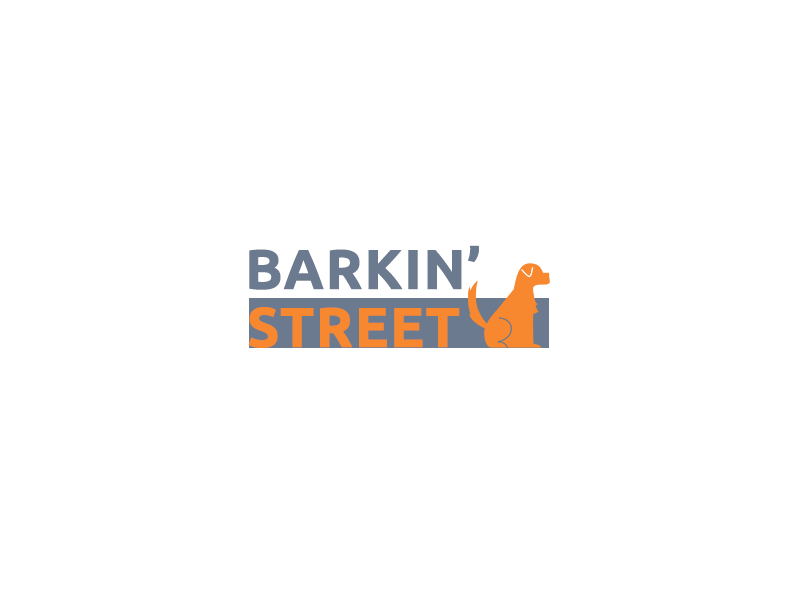
<style>
.page{position:relative;width:800px;height:600px;background:#ffffff}
.page>*{position:absolute;margin:0}
.t1{font:56px "Ubuntu-Bold";color:#6b7a8f;font-weight:bold}
.t2{font:56px "Ubuntu-Bold";color:#f7882f;font-weight:bold}
</style>
<div class="page">
<p class="t1" style="left:249px;top:245px;width:230px;height:45px">BARKIN’</p>
<p class="t2" style="left:248px;top:307px;width:212px;height:41px">STREET</p>
</div>
